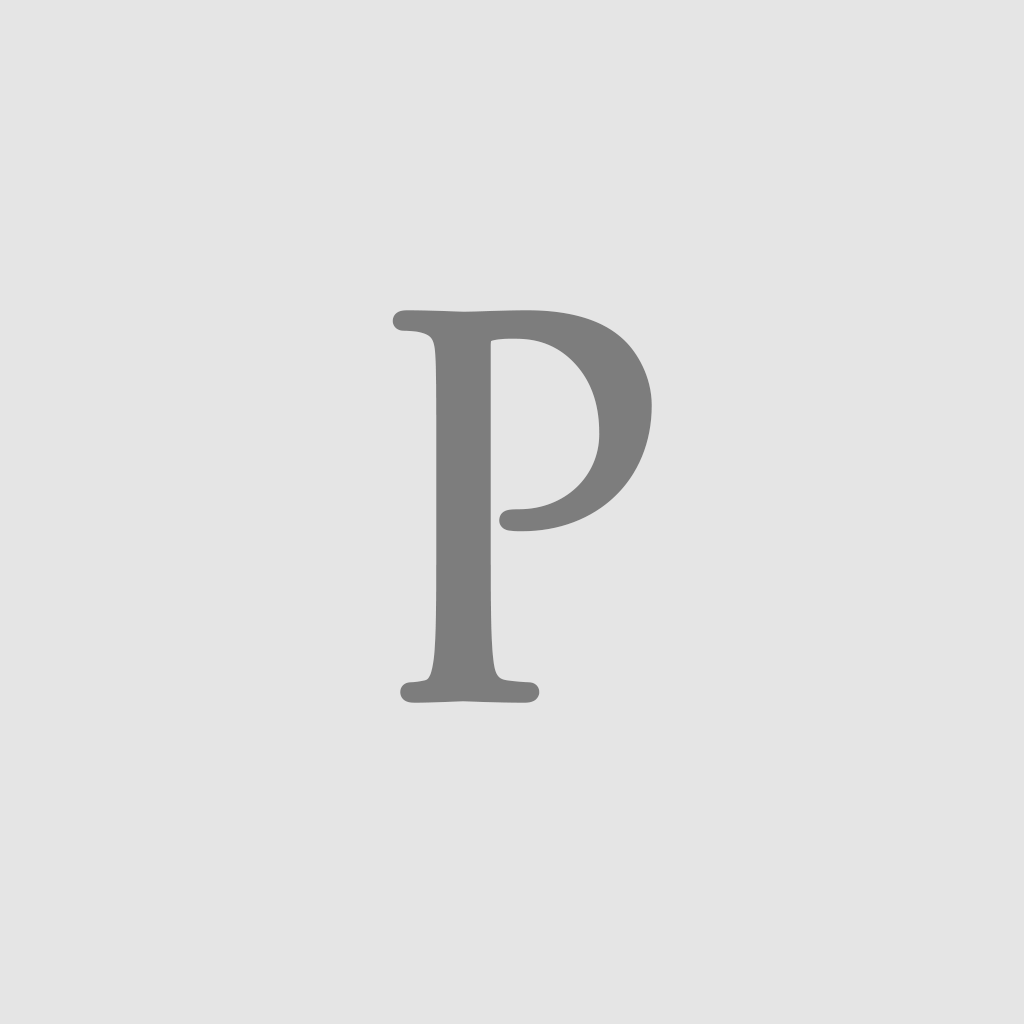
<style>
.page{position:relative;width:1024px;height:1024px;background:#e5e5e5}
.page>*{position:absolute;margin:0}
.t1{font:500px "TrajanPro-Regular";color:#7d7d7d;font-weight:bold}
</style>
<div class="page">
<p class="t1" style="left:392px;top:310px;width:260px;height:393px">P</p>
</div>
